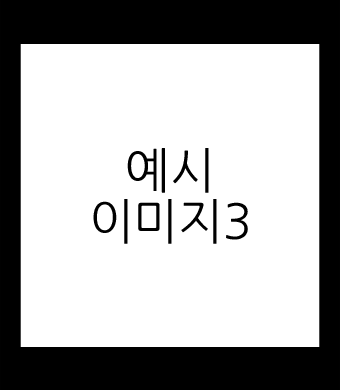
<style>
.page{position:relative;width:340px;height:390px;background:#ffffff}
.page>*{position:absolute;margin:0}
.t1{font:48.4px/51.1px "NanumGothicET";color:#000000}
</style>
<div class="page">
<p class="t1" style="left:93px;top:148px;width:155px;height:96px;text-align:center">예시<br>이미지3</p>
</div>
